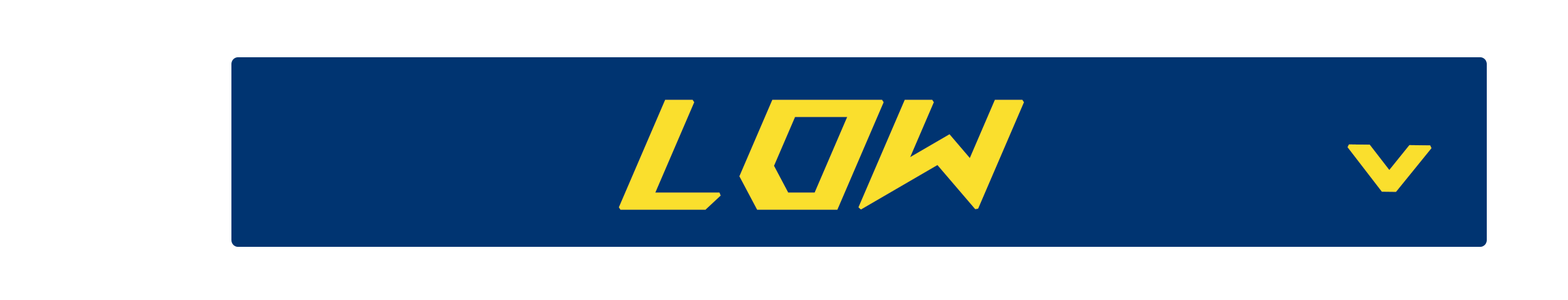
<style>
.page{position:relative;width:1568px;height:300px;background:#ffffff}
.page>*{position:absolute;margin:0}
.t1{font:165.8px "ROGLyonsType-Regular";color:#fadf2d;font-weight:bold;scale:0.88 1}
.t2{font:124.2px "ROGLyonsType-Regular";color:#fadf2d;font-weight:bold}
</style>
<div class="page">
<p class="t1" style="left:618px;top:100px;width:406px;height:110px">LOW</p>
<p class="t2" style="left:1348px;top:144px;width:83px;height:49px;rotate:-179deg">^</p>
</div>
